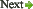
<style>
.page{position:relative;width:33px;height:9px;background:#ffffff}
.page>*{position:absolute;margin:0}
.t1{font:12px "TimesNewRomanPSMT";letter-spacing:-0.005em;color:#31372c}
</style>
<div class="page">
<p class="t1" style="left:0px;top:0px;width:24px;height:9px">Next</p>
<p class="t1" style="left:0px;top:0px;width:24px;height:9px">Next</p>
</div>
